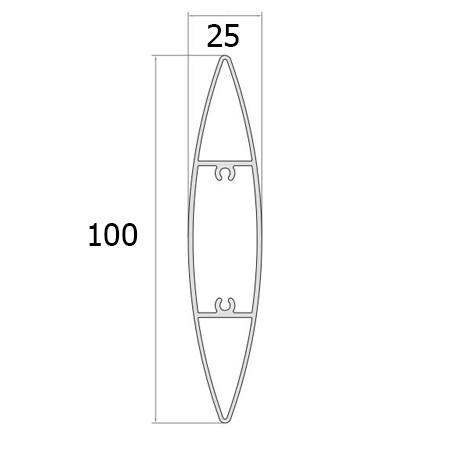
<style>
.page{position:relative;width:454px;height:454px;background:#ffffff}
.page>*{position:absolute;margin:0}
.t1{font:32px "Tahoma";color:#000000}
</style>
<div class="page">
<p class="t1" style="left:207px;top:24px;width:32px;height:23px">25</p>
<p class="t1" style="left:89px;top:223px;width:49px;height:23px">100</p>
</div>
